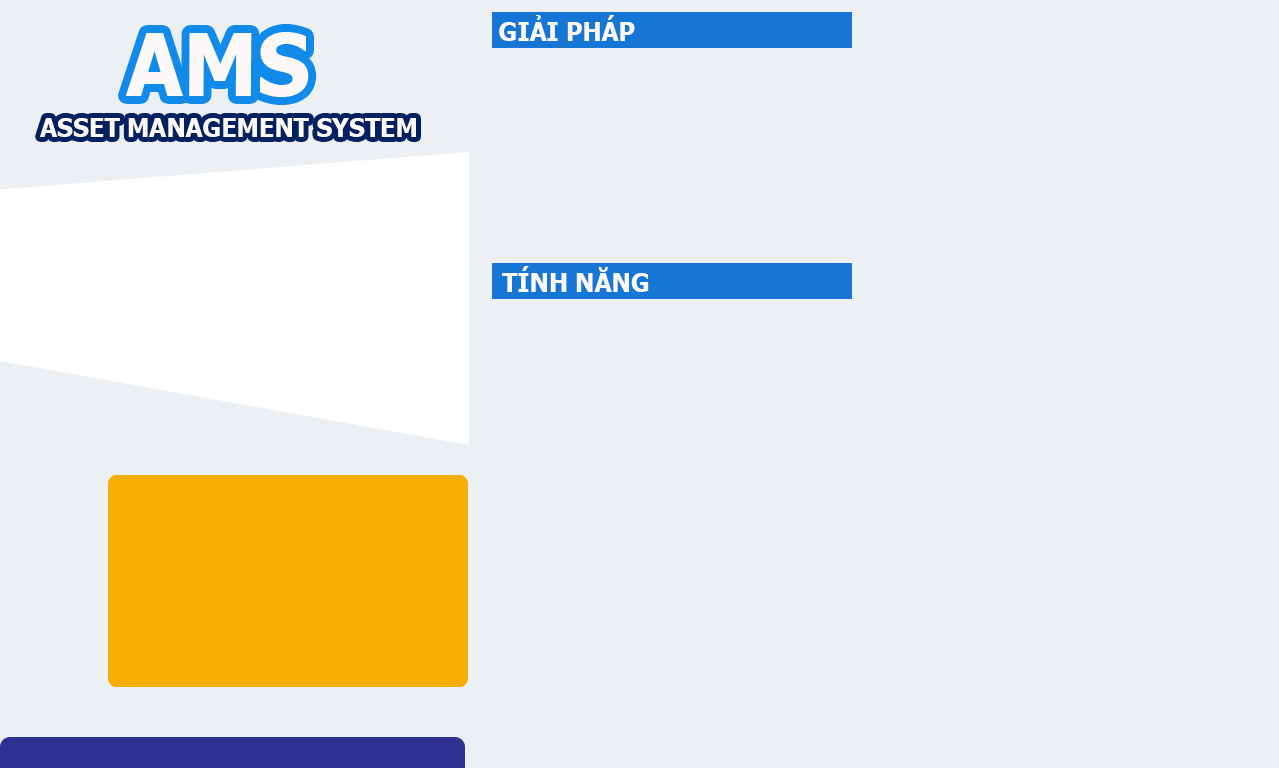
<style>
.page{position:relative;width:1279px;height:768px;background:#edf0f2}
.page>*{position:absolute;margin:0}
.t1{font:25px "Tahoma-Bold";color:#fdf9f9}
.t2{font:87.2px "Tahoma-Bold";color:#fdf9f9;scale:0.95 1}
</style>
<div class="page">
<p class="t1" style="left:499px;top:15px;width:136px;height:26px">GIẢI PHÁP</p>
<p class="t2" style="left:125px;top:32px;width:184px;height:65px">AMS</p>
<p class="t1" style="left:40px;top:118px;width:376px;height:19px">ASSET MANAGEMENT SYSTEM</p>
<p class="t1" style="left:502px;top:266px;width:147px;height:26px">TÍNH NĂNG</p>
</div>
